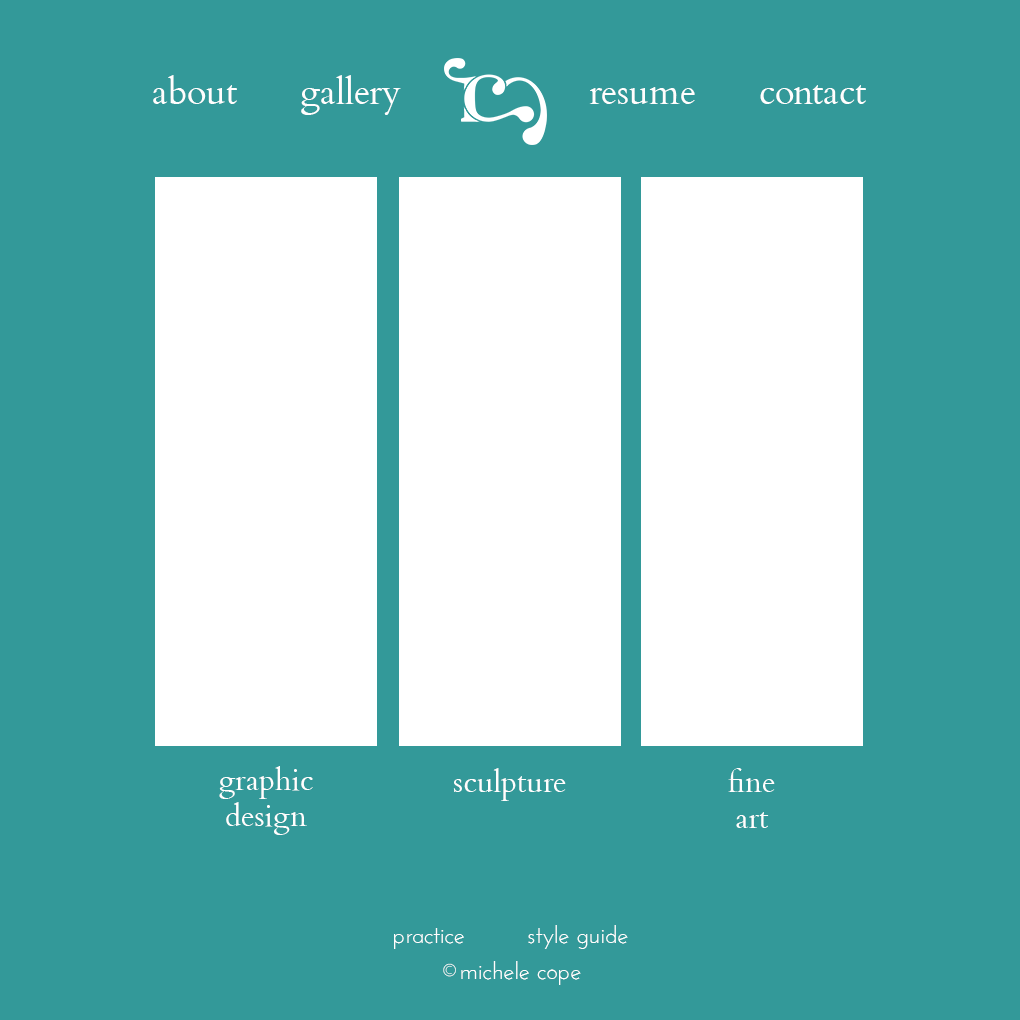
<style>
.page{position:relative;width:1020px;height:1020px;background:#339999}
.page>*{position:absolute;margin:0}
.t1{font:36px "Cardo";color:#fffefe}
.t2{font:30px "Cardo";color:#fffefe}
.t3{font:24px/36px "JosefinSans";color:#fffefe}
</style>
<div class="page">
<p class="t1" style="left:153px;top:75px;width:713px;height:40px">about gallery   resume contact</p>
<p class="t2" style="left:219px;top:766px;width:94px;height:69px;text-align:center">graphic <br>design</p>
<p class="t2" style="left:453px;top:768px;width:113px;height:33px">sculpture</p>
<p class="t2" style="left:728px;top:768px;width:47px;height:60px;text-align:center">fine<br>art</p>
<p class="t3" style="left:394px;top:925px;width:234px;height:60px;text-align:justify">practice         style guide<br>©michele cope</p>
</div>
